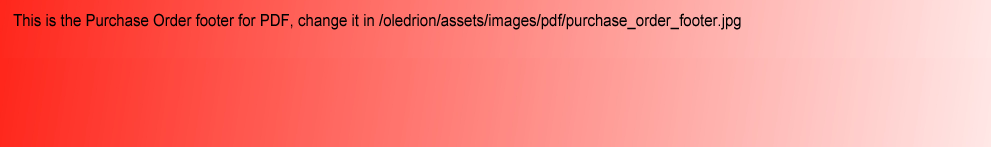
<style>
.page{position:relative;width:991px;height:147px}
.page>*{position:absolute;margin:0}
.t1{font:16.7px "ArialMT";color:#000001;scale:0.9 1}
</style>
<div class="page">
<p class="t1" style="left:13px;top:13px;width:728px;height:17px">This is the Purchase Order footer for PDF, change it in /oledrion/assets/images/pdf/purchase_order_footer.jpg</p>
</div>
